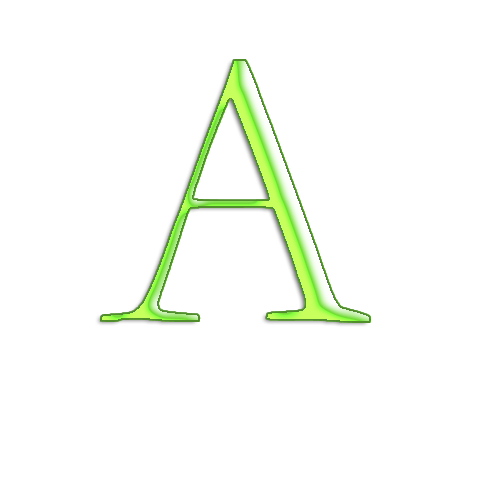
<style>
.page{position:relative;width:500px;height:500px;background:#ffffff}
.page>*{position:absolute;margin:0}
.t1{font:400px "Garamond"}
</style>
<div class="page">
<p class="t1" style="left:100px;top:59px;width:271px;height:264px">A</p>
</div>
